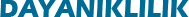
<style>
.page{position:relative;width:189px;height:17px;background:#006c95}
.page>*{position:absolute;margin:0}
.t1{font:25px "ErasITC-Bold";color:#006c95}
</style>
<div class="page">
<p class="t1" style="left:0px;top:0px;width:189px;height:17px">DAYANIKLILIK</p>
</div>
